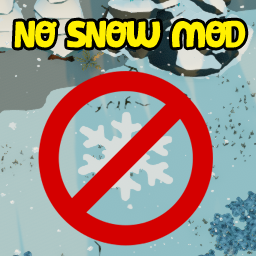
<style>
.page{position:relative;width:256px;height:256px}
.page>*{position:absolute;margin:0}
.t1{font:42px "Pequea";letter-spacing:-0.05em;color:#fff000}
</style>
<div class="page">
<p class="t1" style="left:14px;top:20px;width:232px;height:28px">NO SNOW MOD</p>
</div>
